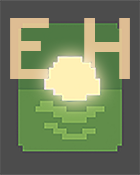
<style>
.page{position:relative;width:140px;height:175px;background:#4c4c4c}
.page>*{position:absolute;margin:0}
.t1{font:85px "TrebuchetMS-Bold";color:#dfc393}
</style>
<div class="page">
<p class="t1" style="left:10px;top:18px;width:120px;height:61px">E H</p>
</div>
